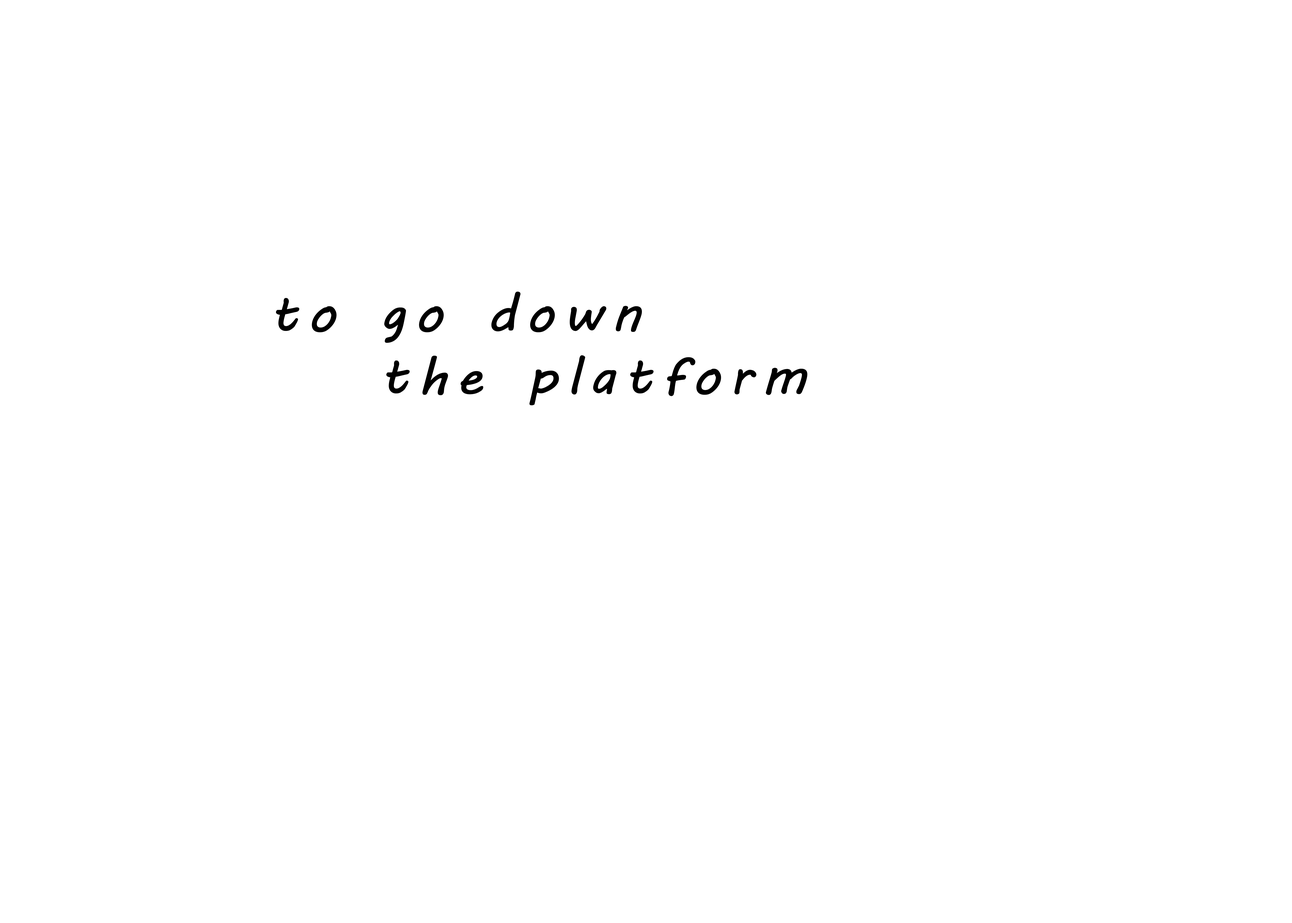
<style>
.page{position:relative;width:1292px;height:923px;background:#ffffff}
.page>*{position:absolute;margin:0}
.t1{font:51.1px "MVBoli";letter-spacing:0.14em;color:#000000;font-weight:bold;scale:1.05 1}
</style>
<div class="page">
<p class="t1" style="left:276px;top:291px;width:366px;height:52px">to go down</p>
<p class="t1" style="left:386px;top:355px;width:421px;height:50px">the platform</p>
</div>
